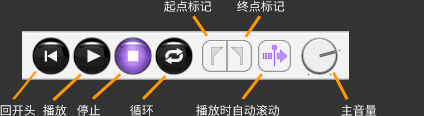
<style>
.page{position:relative;width:424px;height:116px;background:#333333}
.page>*{position:absolute;margin:0}
.t1{font:12px "Sarasa-Gothic-SC-Regular";color:#ffffff}
.t2{font:12px "Sarasa-Gothic-SC-Regular"}
</style>
<div class="page">
<p class="t1" style="left:164px;top:0px;width:48px;height:12px">起点标记</p>
<p class="t1" style="left:237px;top:0px;width:48px;height:12px">终点标记</p>
<p class="t1" style="left:0px;top:105px;width:35px;height:11px">回开头</p>
<p class="t1" style="left:43px;top:104px;width:24px;height:12px">播放</p>
<p class="t1" style="left:77px;top:104px;width:23px;height:12px">停止</p>
<p class="t2" style="left:130px;top:104px;width:23px;height:12px">循环</p>
<p class="t1" style="left:196px;top:104px;width:83px;height:12px">播放时自动滚动</p>
<p class="t1" style="left:341px;top:104px;width:36px;height:12px">主音量</p>
</div>
